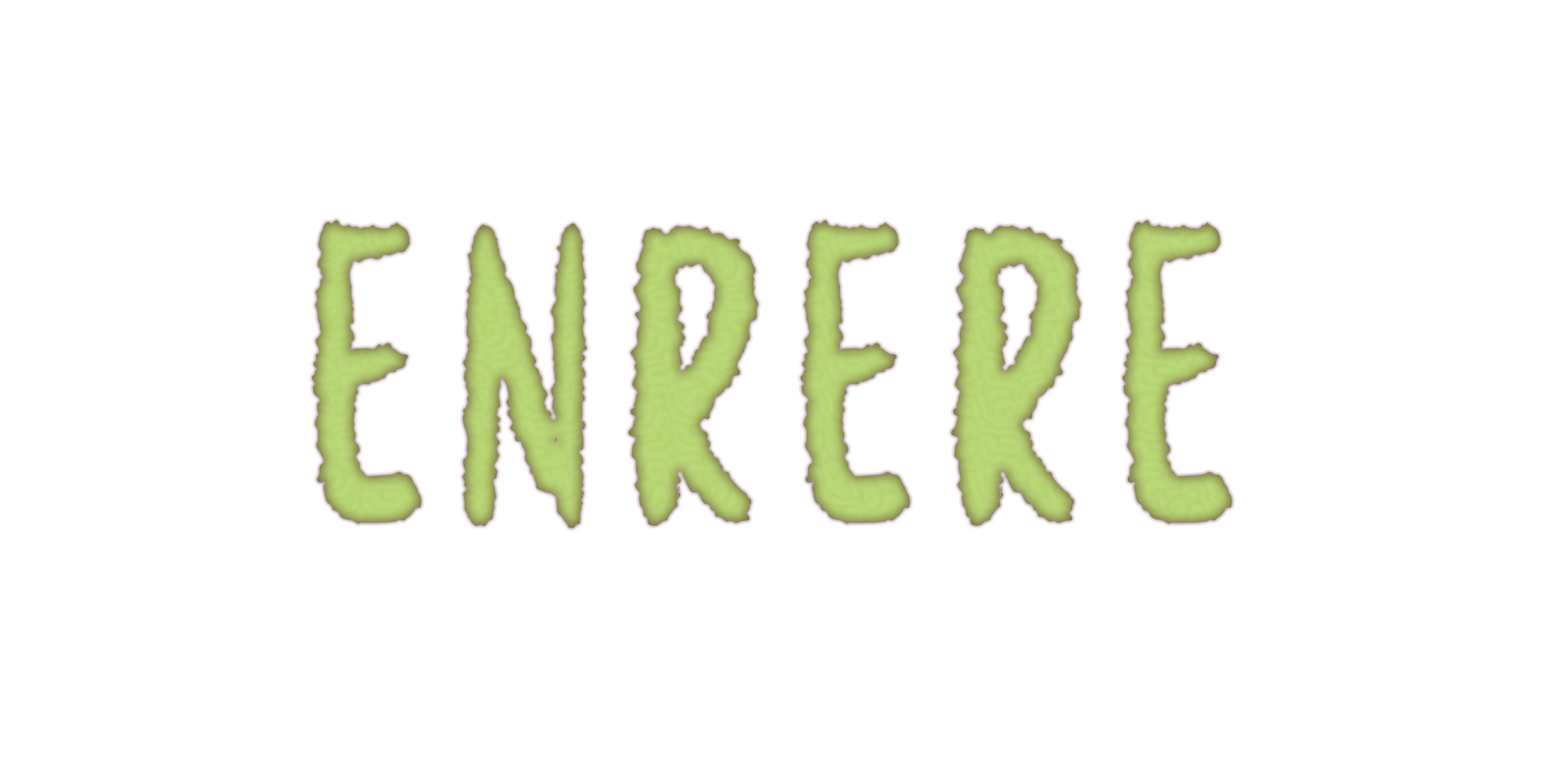
<style>
.page{position:relative;width:1544px;height:772px;background:#ffffff}
.page>*{position:absolute;margin:0}
.t1{font:321.7px "Metalien";letter-spacing:0.1em;color:#b7d974}
</style>
<div class="page">
<p class="t1" style="left:312px;top:220px;width:920px;height:308px">Enrere</p>
</div>
